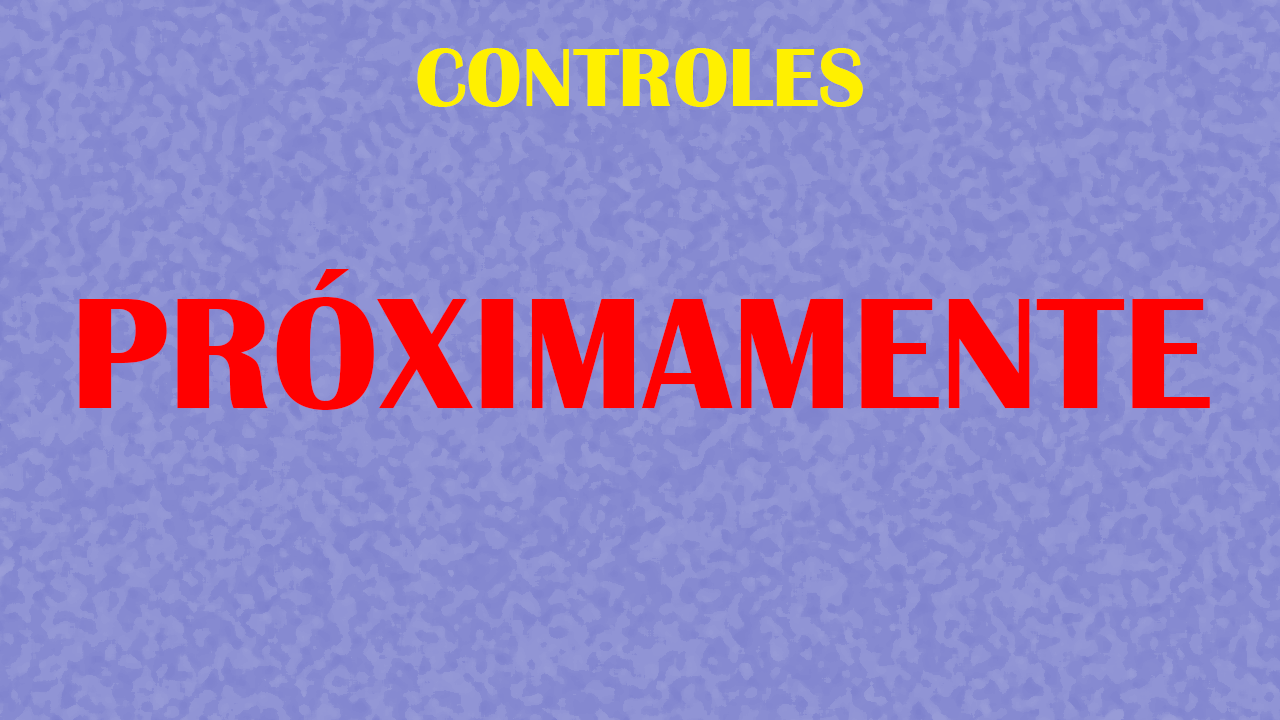
<style>
.page{position:relative;width:1280px;height:720px;background:#868ad1}
.page>*{position:absolute;margin:0}
.t1{font:86.1px "BritannicBold";color:#fff000}
.t2{font:164px "BritannicBold";color:#ff0000}
</style>
<div class="page">
<p class="t1" style="left:417px;top:48px;width:446px;height:59px">CONTROLES</p>
<p class="t2" style="left:79px;top:269px;width:1131px;height:141px">PRÓXIMAMENTE</p>
</div>
